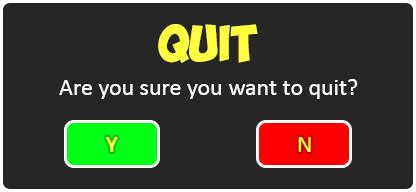
<style>
.page{position:relative;width:416px;height:192px;background:#262626}
.page>*{position:absolute;margin:0}
.t1{font:36px "ObelixPro";color:#ffff40}
.t2{font:24px "Calibri";color:#ffffff}
.t3{font:24px "Calibri-Bold";color:#ffff40}
.t4{font:24px "Calibri";color:#ffff40}
</style>
<div class="page">
<p class="t1" style="left:158px;top:24px;width:100px;height:39px">QUIT</p>
<p class="t2" style="left:59px;top:79px;width:299px;height:20px">Are you sure you want to quit?</p>
<p class="t3" style="left:105px;top:137px;width:13px;height:15px">Y</p>
<p class="t4" style="left:298px;top:137px;width:13px;height:15px">N</p>
</div>
